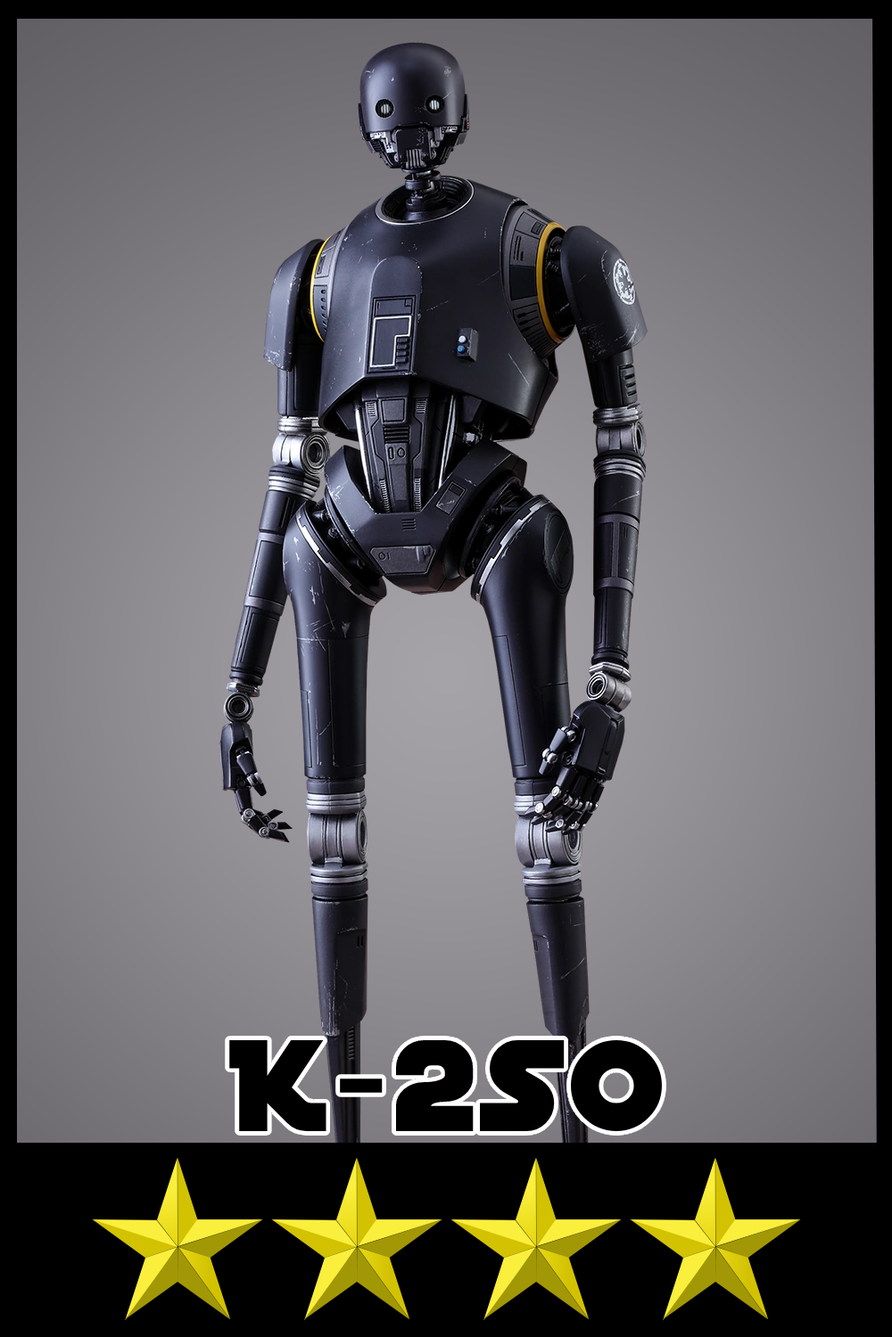
<style>
.page{position:relative;width:892px;height:1337px}
.page>*{position:absolute;margin:0}
.t1{font:139.9px "DistantGalaxy";color:#000000}
</style>
<div class="page">
<p class="t1" style="left:229px;top:1041px;width:433px;height:91px">K-2sO</p>
</div>
